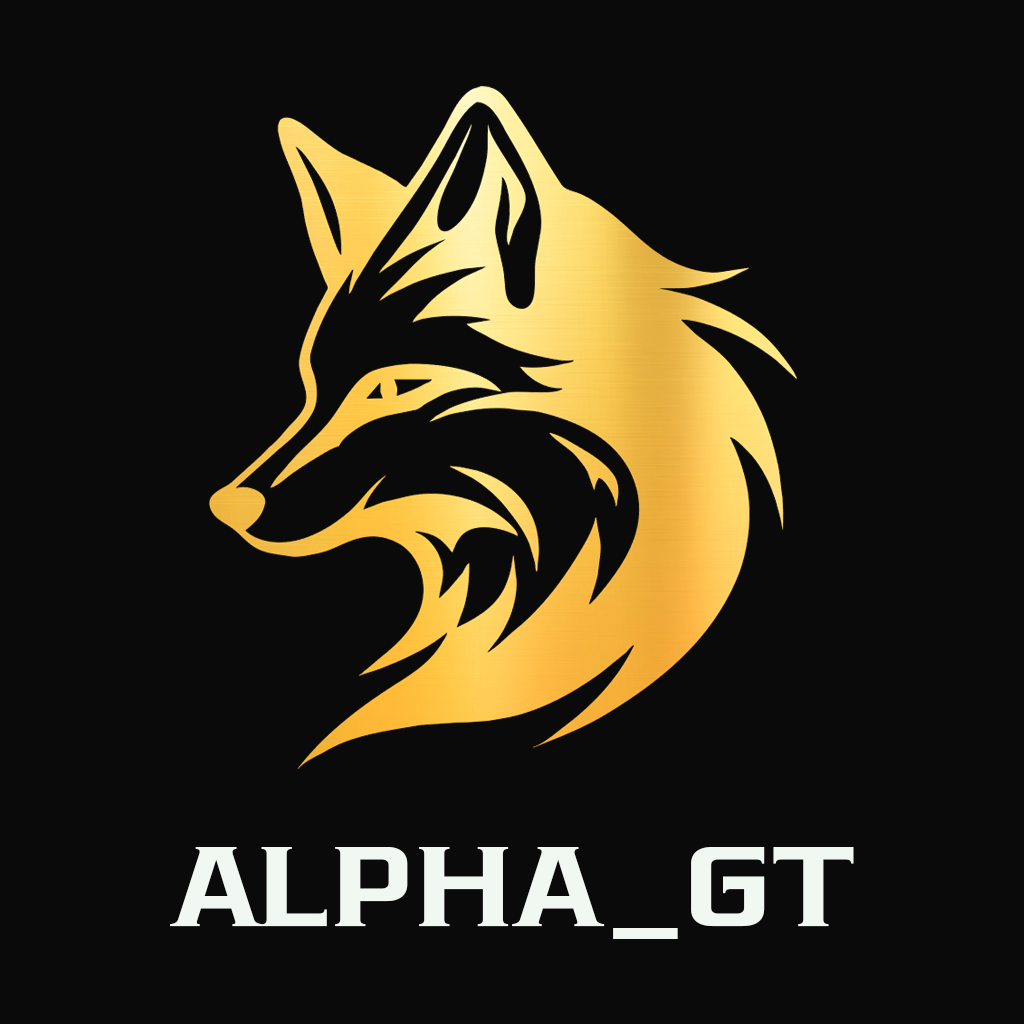
<style>
.page{position:relative;width:1024px;height:1024px;background:#0a0a0a}
.page>*{position:absolute;margin:0}
.t1{font:112.5px "ARGANDE-Regular";color:#f1f8f2;scale:1.27 1}
</style>
<div class="page">
<p class="t1" style="left:170px;top:847px;width:684px;height:92px">ALPHA_GT</p>
</div>
